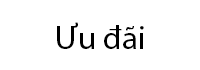
<style>
.page{position:relative;width:200px;height:70px;background:#ffffff}
.page>*{position:absolute;margin:0}
.t1{font:32.9px "MyriadPro-Regular";color:#000000}
</style>
<div class="page">
<p class="t1" style="left:57px;top:22px;width:87px;height:27px">Ưu đãi</p>
</div>
